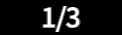
<style>
.page{position:relative;width:122px;height:35px;background:#000000}
.page>*{position:absolute;margin:0}
.t1{font:26px "WebPSD-18463539-0-Regular";color:#ffffff;font-weight:bold}
</style>
<div class="page">
<p class="t1" style="left:0px;top:0px;width:122px;height:35px">1/3</p>
</div>
